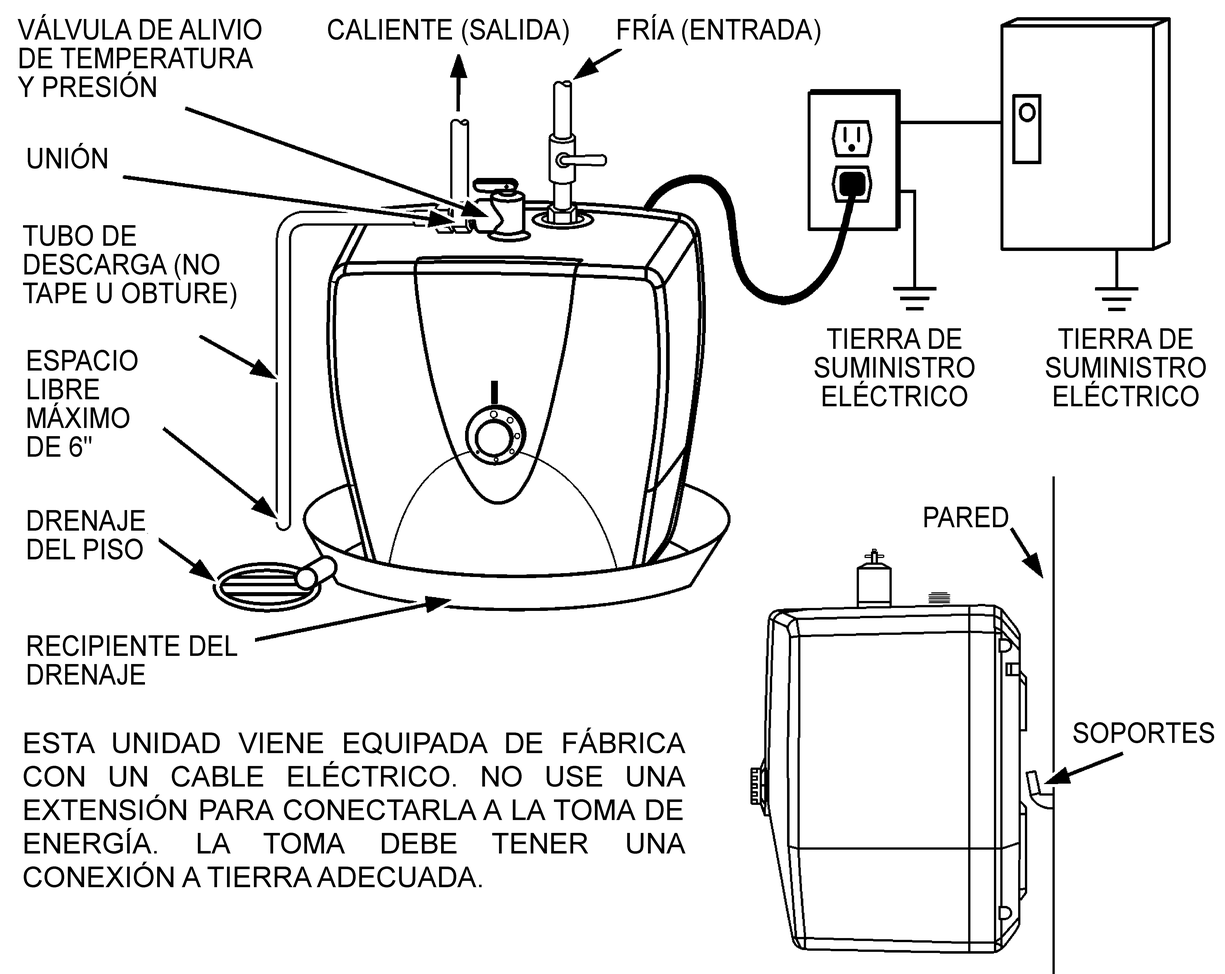
<style>
.page{position:relative;width:1225px;height:974px;background:#ffffff}
.page>*{position:absolute;margin:0}
.t1{font:28.7px/28.7px "ArialMT";color:#000000;scale:0.9 1}
.t2{font:28.7px "ArialMT";color:#000000;scale:0.9 1}
.t3{font:28.7px/33.5px "ArialMT";color:#000000}
</style>
<div class="page">
<p class="t1" style="left:18px;top:14px;width:243px;height:83px">VÁLVULA DE ALIVIO DE TEMPERATURA <br>Y PRESIÓN</p>
<p class="t2" style="left:618px;top:14px;width:202px;height:31px">FRÍA (ENTRADA)</p>
<p class="t2" style="left:328px;top:19px;width:240px;height:26px">CALIENTE (SALIDA)</p>
<p class="t2" style="left:28px;top:143px;width:79px;height:26px">UNIÓN</p>
<p class="t1" style="left:23px;top:225px;width:213px;height:84px">TUBO DE DESCARGA (NO TAPE U OBTURE)</p>
<p class="t1" style="left:814px;top:328px;width:160px;height:78px;text-align:center">TIERRA DE SUMINISTRO ELÉCTRICO</p>
<p class="t1" style="left:1046px;top:328px;width:159px;height:78px;text-align:center">TIERRA DE SUMINISTRO ELÉCTRICO</p>
<p class="t1" style="left:28px;top:350px;width:109px;height:107px">ESPACIO LIBRE MÁXIMO DE 6"</p>
<p class="t1" style="left:28px;top:510px;width:117px;height:49px">DRENAJE DEL PISO</p>
<p class="t2" style="left:924px;top:507px;width:84px;height:20px">PARED</p>
<p class="t1" style="left:28px;top:635px;width:209px;height:50px">RECIPIENTE DEL DRENAJE</p>
<p class="t2" style="left:1073px;top:722px;width:141px;height:21px">SOPORTES</p>
<p class="t3" style="left:24px;top:727px;width:661px;height:160px;text-align:justify">ESTA UNIDAD VIENE EQUIPADA DE FÁBRICA CON UN CABLE ELÉCTRICO. NO USE UNA EXTENSIÓN PARA CONECTARLA A LA TOMA DE ENERGÍA. LA TOMA DEBE TENER UNA CONEXIÓN A TIERRA ADECUADA.</p>
</div>
